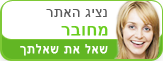
<style>
.page{position:relative;width:163px;height:61px;background:#ffffff}
.page>*{position:absolute;margin:0}
.t1{font:14px "ArialMT";letter-spacing:0.04em;color:#5b5b5b}
.t2{font:17px "ArialMT";letter-spacing:0.04em;color:#6acd1f;text-transform:uppercase;font-weight:bold}
.t3{font:12px "ArialMT";letter-spacing:0.06em;color:#ffffff;font-weight:bold}
</style>
<div class="page">
<p class="t1" style="left:46px;top:9px;width:61px;height:8px">רתאה גיצנ</p>
<p class="t2" style="left:61px;top:26px;width:47px;height:10px">רבוחמ</p>
<p class="t3" style="left:20px;top:44px;width:88px;height:12px">ךתלאש תא לאש</p>
</div>
